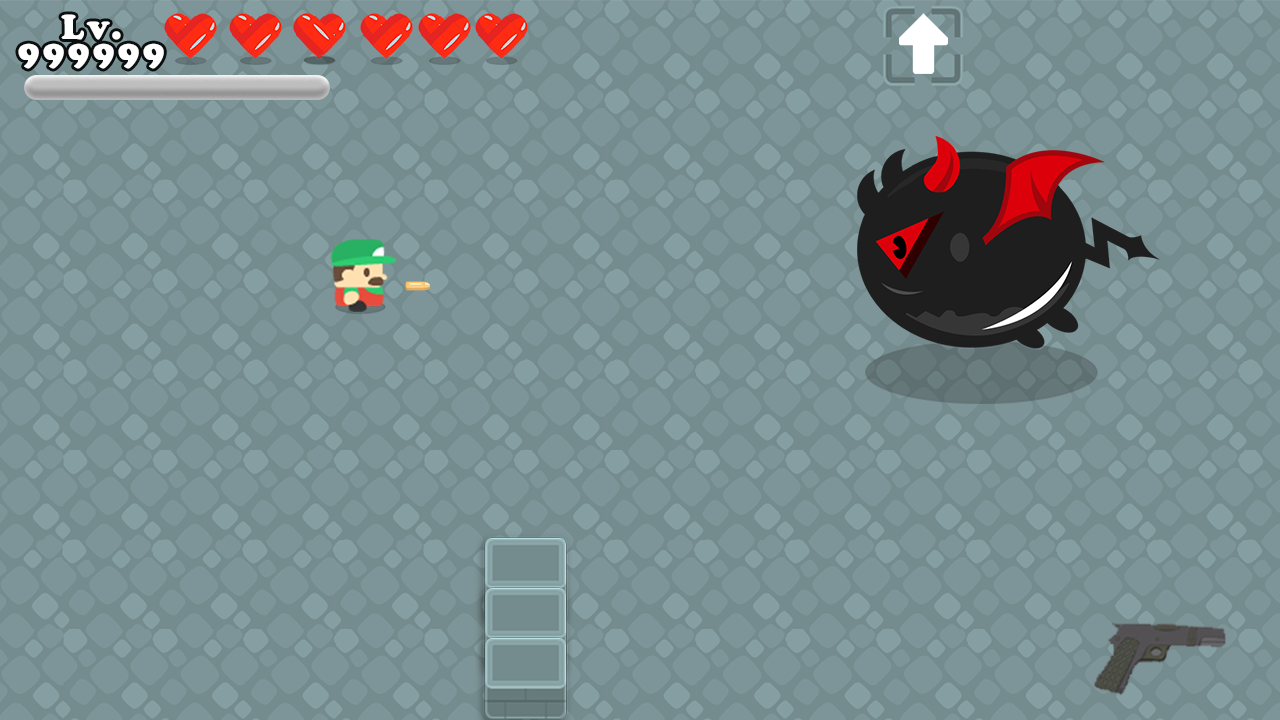
<style>
.page{position:relative;width:1280px;height:720px;background:#7d9598}
.page>*{position:absolute;margin:0}
.t1{font:36px/25px "CooperBlack";letter-spacing:0.1em;color:#ffffff}
</style>
<div class="page">
<p class="t1" style="left:18px;top:14px;width:146px;height:55px;text-align:center">Lv.<br>999999</p>
</div>
